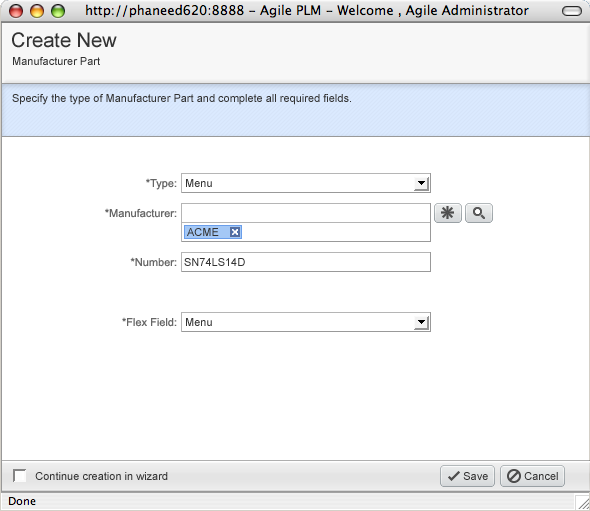
<style>
.page{position:relative;width:590px;height:511px;background:#ffffff}
.page>*{position:absolute;margin:0}
.t1{font:20px "ArialMT";color:#333333}
.t2{font:11px "ArialMT";color:#333333}
.t3{font:11px "ArialMT";color:#666666}
</style>
<div class="page">
<p class="t1" style="left:12px;top:32px;width:105px;height:16px">Create New</p>
<p class="t2" style="left:13px;top:57px;width:87px;height:8px">Manufacturer Part</p>
<p class="t2" style="left:12px;top:94px;width:339px;height:11px">Specify the type of Manufacturer Part and complete all required fields.</p>
<p class="t3" style="left:146px;top:178px;width:31px;height:12px">*Type:</p>
<p class="t2" style="left:186px;top:179px;width:26px;height:8px">Menu</p>
<p class="t3" style="left:105px;top:208px;width:72px;height:10px">*Manufacturer:</p>
<p class="t2" style="left:187px;top:228px;width:32px;height:8px">ACME</p>
<p class="t3" style="left:130px;top:257px;width:47px;height:10px">*Number:</p>
<p class="t2" style="left:184px;top:258px;width:61px;height:8px">SN74LS14D</p>
<p class="t3" style="left:122px;top:317px;width:55px;height:10px">*Flex Field:</p>
<p class="t2" style="left:186px;top:318px;width:26px;height:8px">Menu</p>
<p class="t2" style="left:35px;top:472px;width:133px;height:8px">Continue creation in wizard</p>
<p class="t2" style="left:463px;top:472px;width:25px;height:8px">Save</p>
<p class="t2" style="left:524px;top:472px;width:34px;height:8px">Cancel</p>
</div>
